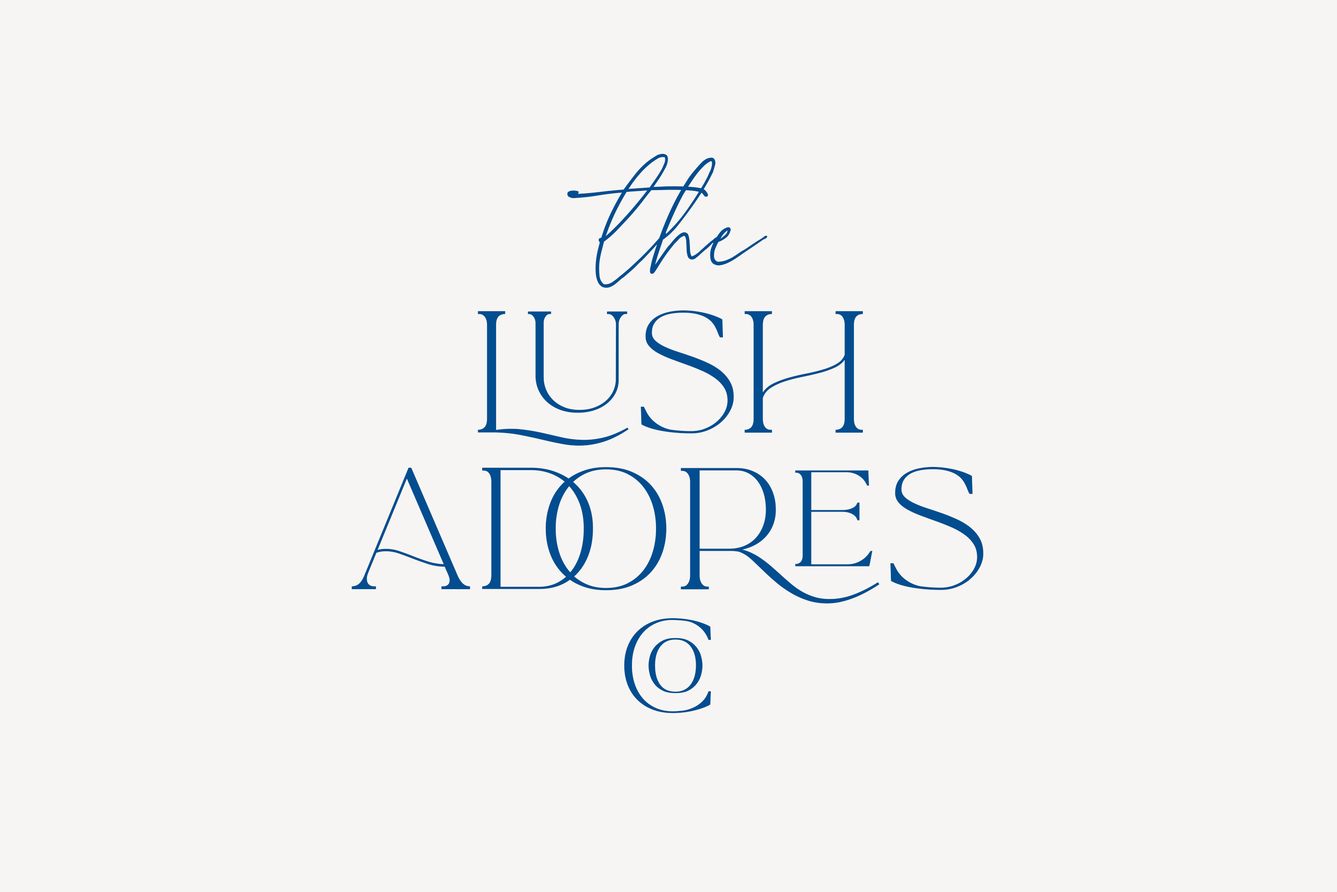
<style>
.page{position:relative;width:1337px;height:892px;background:#f6f5f3}
.page>*{position:absolute;margin:0}
.t1{font:215px "LaLuxesScript";color:#024d90}
.t2{font:151.4px/156.6px "LaLuxesSerif";color:#024d90}
.t3{font:116.9px "LaLuxesSerif";color:#024d90}
</style>
<div class="page">
<p class="t1" style="left:568px;top:154px;width:200px;height:134px">the</p>
<p class="t2" style="left:352px;top:310px;width:632px;height:293px;text-align:center">lush<br>adores</p>
<p class="t3" style="left:624px;top:618px;width:87px;height:95px">co</p>
</div>
